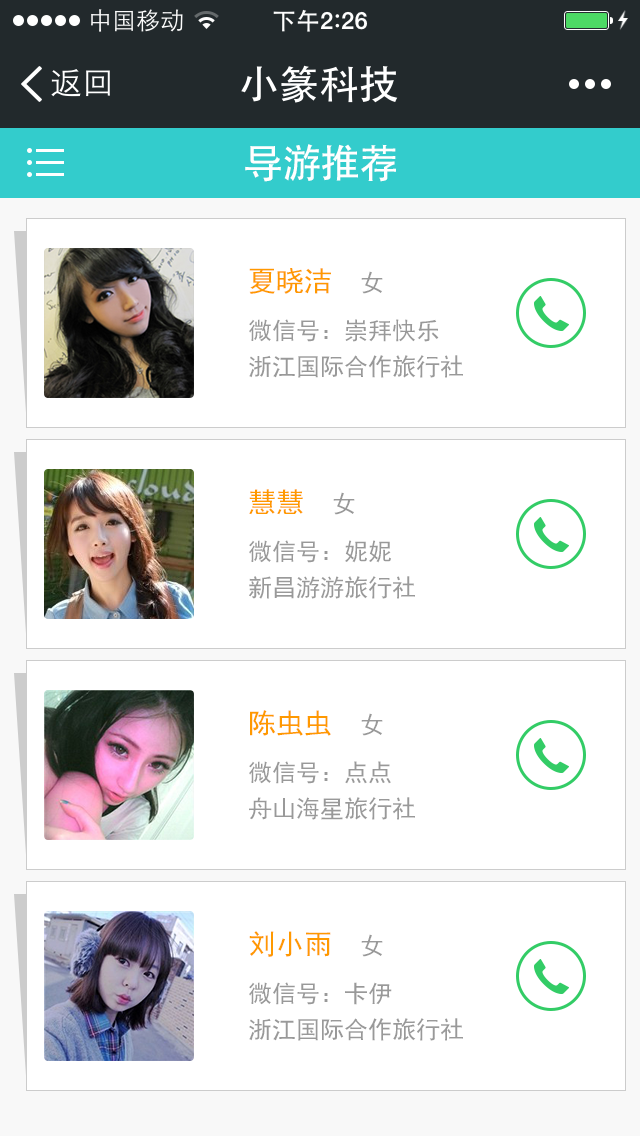
<style>
.page{position:relative;width:640px;height:1136px;background:#ffffff}
.page>*{position:absolute;margin:0}
.t1{font:40px "AdobeHeitiStd-Regular";color:#ffffff}
.t2{font:24px/48px "SimHei";color:#999999}
.t3{font:28px/48px "SimHei";color:#ff9900}
.t4{font:24px/36px "SimHei";color:#999999}
</style>
<div class="page">
<p class="t1" style="left:245px;top:144px;width:151px;height:38px">导游推荐</p>
<p class="t2" style="left:249px;top:268px;width:214px;height:110px;text-align:right"><span class="t3">夏晓洁  </span>女<br>微信号：崇拜快乐<br><span class="t4">浙江国际合作旅行社</span></p>
<p class="t2" style="left:249px;top:489px;width:166px;height:110px;text-align:right"><span class="t3">慧慧  </span>女<br>微信号：妮妮<br><span class="t4">新昌游游旅行社</span></p>
<p class="t2" style="left:249px;top:710px;width:166px;height:110px;text-align:right"><span class="t3">陈虫虫  </span>女<br>微信号：点点<br><span class="t4">舟山海星旅行社</span></p>
<p class="t4" style="left:249px;top:931px;width:214px;height:110px;text-align:right"><span class="t3">刘小雨  </span><span class="t2">女<br>微信号：卡伊<br></span>浙江国际合作旅行社</p>
</div>
